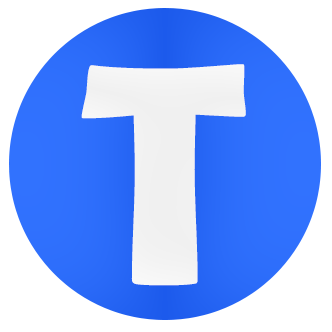
<style>
.page{position:relative;width:332px;height:332px;background:#ffffff}
.page>*{position:absolute;margin:0}
.t1{font:318px "BerlinSansFBDemi-Bold";color:#ffffff}
</style>
<div class="page">
<p class="t1" style="left:81px;top:64px;width:165px;height:222px">T</p>
</div>
